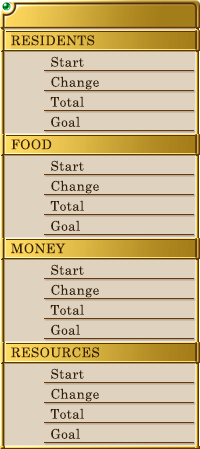
<style>
.page{position:relative;width:200px;height:449px;background:#dfd3c0}
.page>*{position:absolute;margin:0}
.t1{font:13.3px "CenturySchoolbook";letter-spacing:0.025em;color:#382005}
</style>
<div class="page">
<p class="t1" style="left:11px;top:35px;width:84px;height:11px">RESIDENTS</p>
<p class="t1" style="left:51px;top:56px;width:33px;height:11px">Start</p>
<p class="t1" style="left:51px;top:76px;width:48px;height:14px">Change</p>
<p class="t1" style="left:50px;top:96px;width:34px;height:11px">Total</p>
<p class="t1" style="left:51px;top:116px;width:29px;height:11px">Goal</p>
<p class="t1" style="left:11px;top:139px;width:41px;height:11px">FOOD</p>
<p class="t1" style="left:51px;top:160px;width:33px;height:11px">Start</p>
<p class="t1" style="left:51px;top:180px;width:48px;height:14px">Change</p>
<p class="t1" style="left:50px;top:200px;width:34px;height:11px">Total</p>
<p class="t1" style="left:51px;top:220px;width:29px;height:11px">Goal</p>
<p class="t1" style="left:11px;top:243px;width:55px;height:11px">MONEY</p>
<p class="t1" style="left:51px;top:264px;width:33px;height:11px">Start</p>
<p class="t1" style="left:51px;top:284px;width:48px;height:14px">Change</p>
<p class="t1" style="left:50px;top:304px;width:34px;height:11px">Total</p>
<p class="t1" style="left:51px;top:324px;width:29px;height:11px">Goal</p>
<p class="t1" style="left:11px;top:347px;width:89px;height:11px">RESOURCES</p>
<p class="t1" style="left:51px;top:368px;width:33px;height:11px">Start</p>
<p class="t1" style="left:51px;top:388px;width:48px;height:14px">Change</p>
<p class="t1" style="left:50px;top:408px;width:34px;height:11px">Total</p>
<p class="t1" style="left:51px;top:428px;width:29px;height:11px">Goal</p>
</div>
